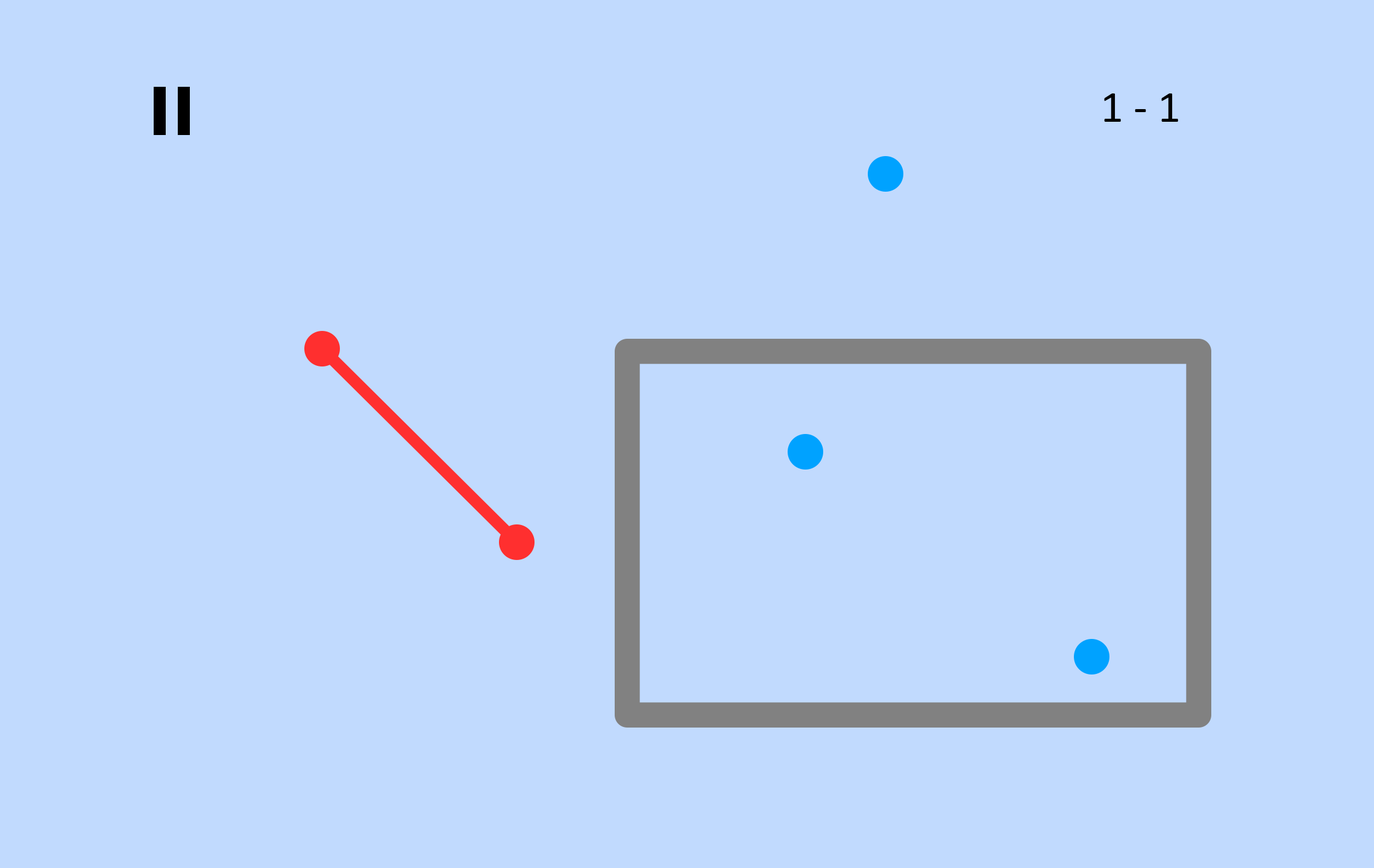
<style>
.page{position:relative;width:1374px;height:868px;background:#c1dafe}
.page>*{position:absolute;margin:0}
.t1{font:45.2px "Calibri";color:#000000;font-variant:small-caps}
</style>
<div class="page">
<p class="t1" style="left:1104px;top:93px;width:74px;height:29px">1 - 1</p>
</div>
